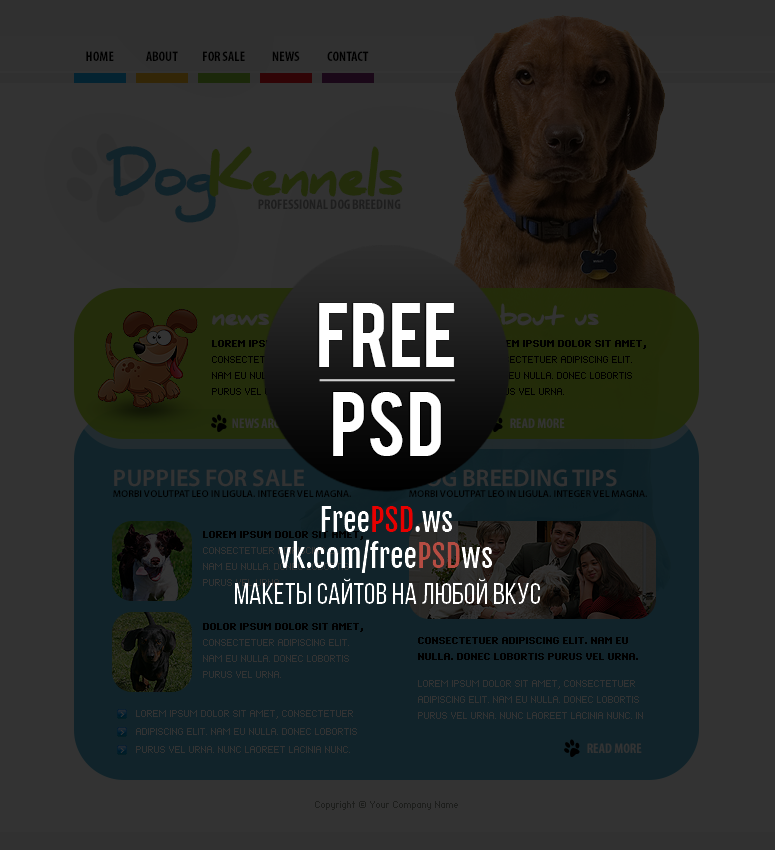
<style>
.page{position:relative;width:775px;height:850px;background:#333333}
.page>*{position:absolute;margin:0}
.t1{font:14px "MyriadPro-BoldCond";color:#000000}
.t2{font:53px "DanielBlack";letter-spacing:-0.04em}
.t3{font:14px "MyriadPro-BoldCond";color:#1e1e1e}
.t4{font:24px "DanielBlack";letter-spacing:-0.04em;color:#333333}
.t5{font:8px/16px "Standard0755";color:#000000}
.t6{font:8px/16px "Standard0765";color:#000000}
.t7{font:14px "MyriadPro-BoldCond"}
.t8{font:14px "MyriadPro-BoldCond";color:#333333}
.t9{font:24px "MyriadPro-Semibold";color:#333333}
.t10{font:10px "MyriadPro-Semibold";color:#000000}
.t11{font:8px/16px "Standard0755"}
.t12{font:8px/16px "Standard0765"}
.t13{font:8px/16px "Standard0755";color:#333333}
.t14{font:8px/18px "Standard0755";color:#333333}
.t15{font:8px "Standard0755";color:#1d1e1c}
</style>
<div class="page">
<p class="t1" style="left:86px;top:51px;width:28px;height:10px">HOME</p>
<p class="t1" style="left:146px;top:51px;width:32px;height:10px">ABOUT</p>
<p class="t1" style="left:203px;top:51px;width:42px;height:10px">FOR SALE</p>
<p class="t1" style="left:272px;top:51px;width:28px;height:10px">NEWS</p>
<p class="t1" style="left:327px;top:51px;width:42px;height:10px">CONTACT</p>
<p class="t2" style="left:106px;top:146px;width:297px;height:77px">DogKennels</p>
<p class="t3" style="left:258px;top:199px;width:143px;height:10px">PROFESSIONAL DOG BREEDING</p>
<p class="t4" style="left:485px;top:303px;width:114px;height:23px">about us</p>
<p class="t4" style="left:212px;top:313px;width:57px;height:13px">news</p>
<p class="t5" style="left:486px;top:340px;width:160px;height:55px"><span class="t6">LOREM IPSUM DOLOR SIT AMET, </span>CONSECTETUER ADIPISCING ELIT. NAM EU NULLA. DONEC LOBORTIS PURUS VEL URNA.</p>
<p class="t7" style="left:232px;top:418px;width:70px;height:10px">NEWS ARCHIVE</p>
<p class="t8" style="left:510px;top:418px;width:55px;height:10px">READ MORE</p>
<p class="t9" style="left:114px;top:469px;width:190px;height:18px">PUPPIES FOR SALE</p>
<p class="t9" style="left:410px;top:469px;width:207px;height:18px">DOG BREEDING TIPS</p>
<p class="t10" style="left:113px;top:490px;width:238px;height:7px">MORBI VOLUTPAT LEO IN LIGULA. INTEGER VEL MAGNA.</p>
<p class="t10" style="left:409px;top:490px;width:238px;height:7px">MORBI VOLUTPAT LEO IN LIGULA. INTEGER VEL MAGNA.</p>
<p class="t11" style="left:203px;top:623px;width:160px;height:55px"><span class="t12">DOLOR IPSUM DOLOR SIT AMET, </span>CONSECTETUER ADIPISCING ELIT. NAM EU NULLA. DONEC LOBORTIS PURUS VEL URNA.</p>
<p class="t6" style="left:418px;top:637px;width:220px;height:23px">CONSECTETUER ADIPISCING ELIT. NAM EU NULLA. DONEC LOBORTIS PURUS VEL URNA.</p>
<p class="t13" style="left:418px;top:680px;width:225px;height:39px">LOREM IPSUM DOLOR SIT AMET, CONSECTETUER ADIPISCING ELIT. NAM EU NULLA. DONEC LOBORTIS PURUS VEL URNA. NUNC LAOREET LACINIA NUNC. IN</p>
<p class="t14" style="left:136px;top:710px;width:221px;height:43px">LOREM IPSUM DOLOR SIT AMET, CONSECTETUER ADIPISCING ELIT. NAM EU NULLA. DONEC LOBORTIS PURUS VEL URNA. NUNC LAOREET LACINIA NUNC.</p>
<p class="t8" style="left:587px;top:743px;width:55px;height:10px">READ MORE</p>
<p class="t15" style="left:315px;top:801px;width:143px;height:9px">Copyright © Your Company Name</p>
</div>
